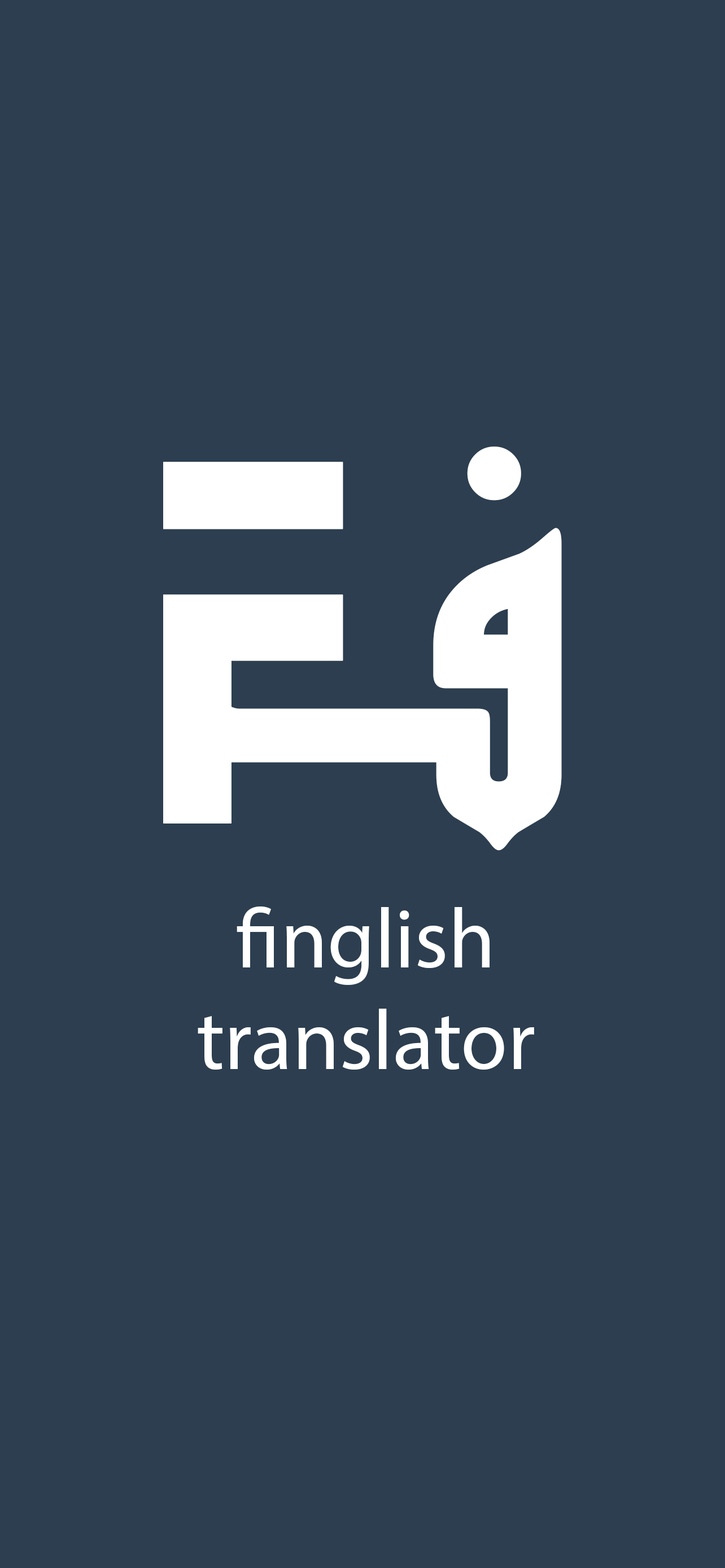
<style>
.page{position:relative;width:725px;height:1568px;background:#2c3e50}
.page>*{position:absolute;margin:0}
.t1{font:517.4px "DiwanKufi";color:#ffffff}
.t2{font:517.4px "ProcrastinatingPixie";color:#ffffff}
.t3{font:84.7px "MyriadPro-Regular";color:#ffffff}
</style>
<div class="page">
<p class="t1" style="left:168px;top:446px;width:394px;height:405px">ف</p>
<p class="t2" style="left:163px;top:462px;width:180px;height:362px">F</p>
<p class="t3" style="left:198px;top:906px;width:336px;height:164px;text-align:center">finglish<br>translator</p>
</div>
